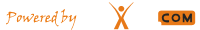
<style>
.page{position:relative;width:200px;height:30px;background:#ffffff}
.page>*{position:absolute;margin:0}
.t1{font:14px "VinerHandITC";color:#eb7a13}
</style>
<div class="page">
<p class="t1" style="left:6px;top:9px;width:71px;height:21px">Powered by</p>
</div>
